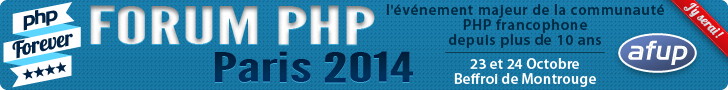
<style>
.page{position:relative;width:728px;height:90px}
.page>*{position:absolute;margin:0}
.t1{font:52.4px "LeagueGothic-Regular";color:#ececec;scale:1.77 1}
.t2{font:15px/15px "MyriadPro-Semibold";letter-spacing:0.05em;color:#002a43}
.t3{font:41.4px "LeagueGothic-Regular";color:#002a51;scale:1.72 1}
.t4{font:41.4px "LeagueGothic-Regular";color:#00294e;scale:1.72 1}
.t5{font:15px/15px "MyriadPro-Semibold";letter-spacing:0.01em;color:#ffffff}
</style>
<div class="page">
<p class="t1" style="left:90px;top:6px;width:285px;height:40px">FORUM PHP</p>
<p class="t1" style="left:90px;top:5px;width:285px;height:40px">FORUM PHP</p>
<p class="t2" style="left:386px;top:4px;width:278px;height:44px;text-align:center">l'événement majeur de la communauté<br>PHP francophone<br>depuis plus de 10 ans</p>
<p class="t3" style="left:214px;top:52px;width:199px;height:32px">Paris 2014</p>
<p class="t4" style="left:214px;top:51px;width:199px;height:32px">Paris 2014</p>
<p class="t5" style="left:454px;top:58px;width:142px;height:29px;text-align:center">23 et 24 Octobre<br>Beffroi de Montrouge</p>
</div>
